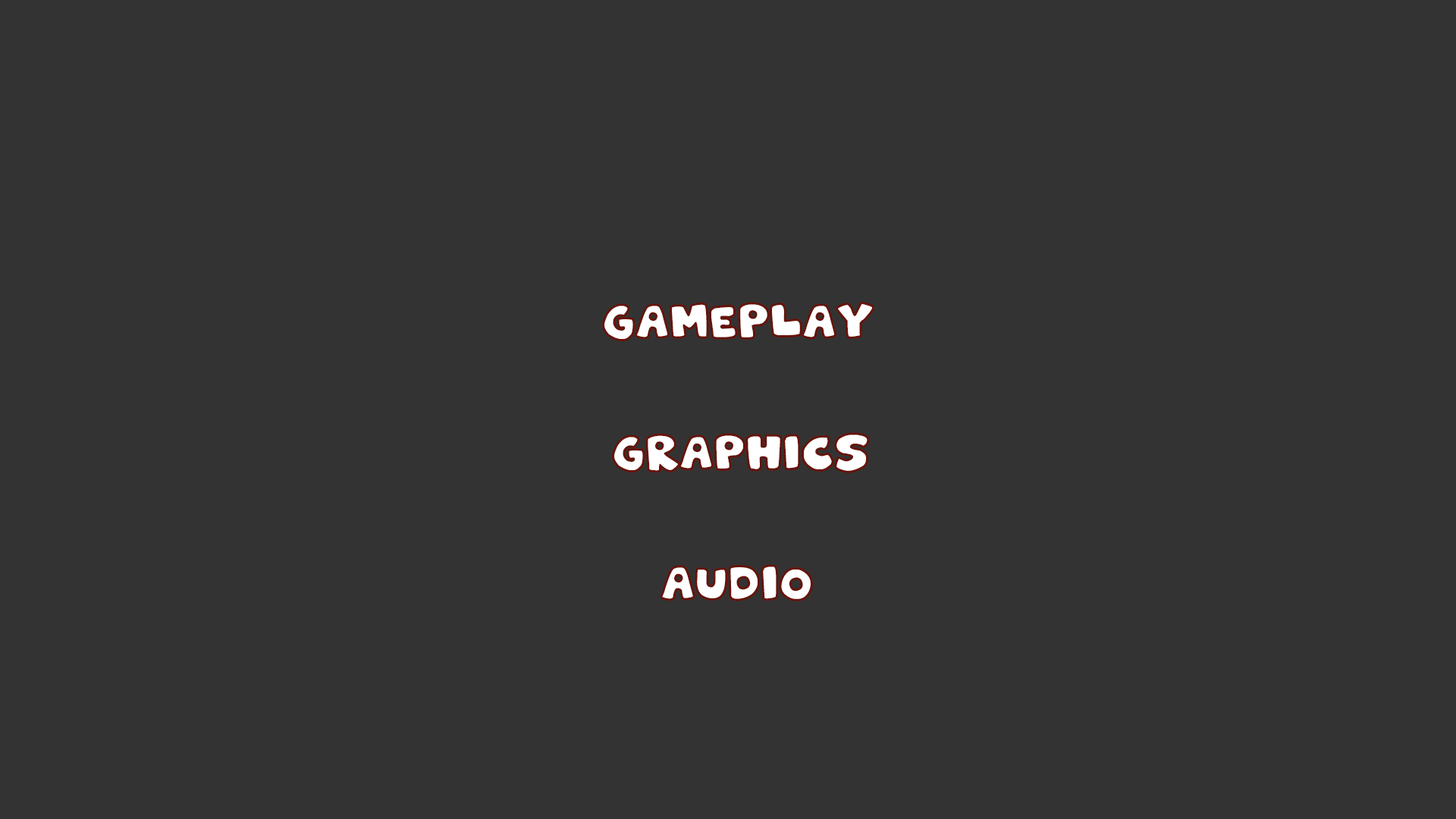
<style>
.page{position:relative;width:1456px;height:819px;background:#333333}
.page>*{position:absolute;margin:0}
.t1{font:21.2px "PatchworkStitchlingsColor";letter-spacing:-0.025em;color:#ffffff}
</style>
<div class="page">
<p class="t1" style="left:604px;top:303px;width:268px;height:36px">Gameplay</p>
<p class="t1" style="left:614px;top:435px;width:254px;height:36px;text-align:center">graphics</p>
<p class="t1" style="left:662px;top:566px;width:149px;height:33px">Audio</p>
</div>
